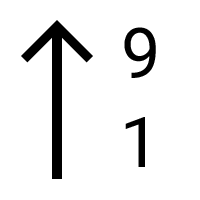
<style>
.page{position:relative;width:200px;height:200px;background:#ffffff}
.page>*{position:absolute;margin:0}
.t1{font:70px "Roboto-Regular";color:#000000}
</style>
<div class="page">
<p class="t1" style="left:124px;top:27px;width:32px;height:51px">9</p>
<p class="t1" style="left:125px;top:117px;width:20px;height:50px">1</p>
</div>
